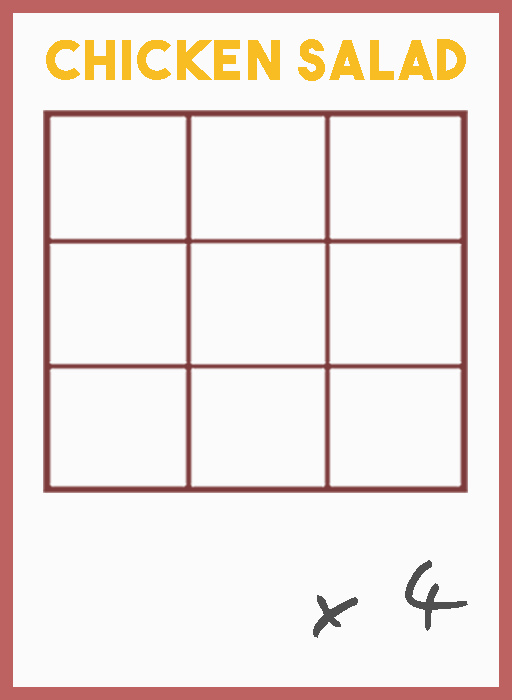
<style>
.page{position:relative;width:512px;height:700px;background:#fbfbfb}
.page>*{position:absolute;margin:0}
.t1{font:54.5px "TheBoldFont";letter-spacing:0.05em;color:#f7bd22}
.t2{font:106.1px "EasySpeech";letter-spacing:0.05em;color:#4f4f4f}
</style>
<div class="page">
<p class="t1" style="left:46px;top:39px;width:420px;height:42px">chicken salad</p>
<p class="t2" style="left:313px;top:560px;width:155px;height:78px">x 4</p>
</div>
